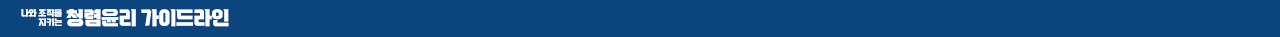
<style>
.page{position:relative;width:1280px;height:37px;background:#0c457e}
.page>*{position:absolute;margin:0}
.t1{font:8.3px "VITRO-CORE-TTF";letter-spacing:-0.025em;color:#ffffff}
.t2{font:18.5px "VITRO-CORE-TTF";letter-spacing:-0.025em;color:#ffffff}
</style>
<div class="page">
<p class="t1" style="left:21px;top:9px;width:41px;height:8px">나와 조직을</p>
<p class="t2" style="left:66px;top:9px;width:163px;height:18px">청렴윤리 가이드라인</p>
<p class="t1" style="left:38px;top:18px;width:24px;height:8px">지키는</p>
</div>
